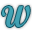
<style>
.page{position:relative;width:32px;height:32px;background:#ffffff}
.page>*{position:absolute;margin:0}
.t1{font:29.4px "ScriptMTStd-Bold";letter-spacing:0.12em;color:#378da2}
</style>
<div class="page">
<p class="t1" style="left:2px;top:6px;width:28px;height:21px">W</p>
</div>
